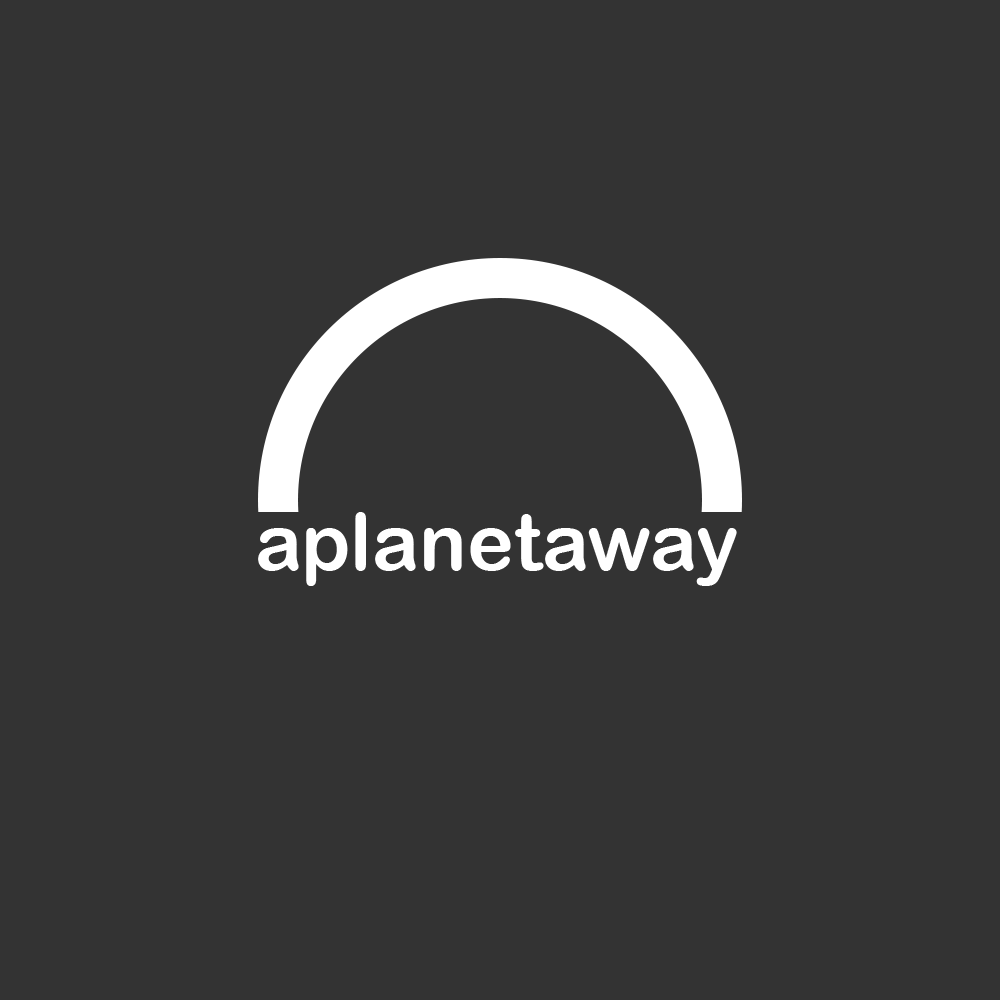
<style>
.page{position:relative;width:1000px;height:1000px;background:#333333}
.page>*{position:absolute;margin:0}
.t1{font:79.2px "ArialRoundedMTBold";color:#ffffff}
</style>
<div class="page">
<p class="t1" style="left:258px;top:512px;width:479px;height:74px">aplanetaway</p>
</div>
